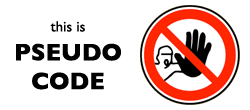
<style>
.page{position:relative;width:250px;height:110px;background:#ffffff}
.page>*{position:absolute;margin:0}
.t1{font:24px "GillSans-Bold";color:#000000}
.t2{font:15px "GillSans";color:#000000}
</style>
<div class="page">
<p class="t1" style="left:16px;top:21px;width:105px;height:69px;text-align:center"><span class="t2">this is<br></span>PSEUDO<br>CODE</p>
</div>
